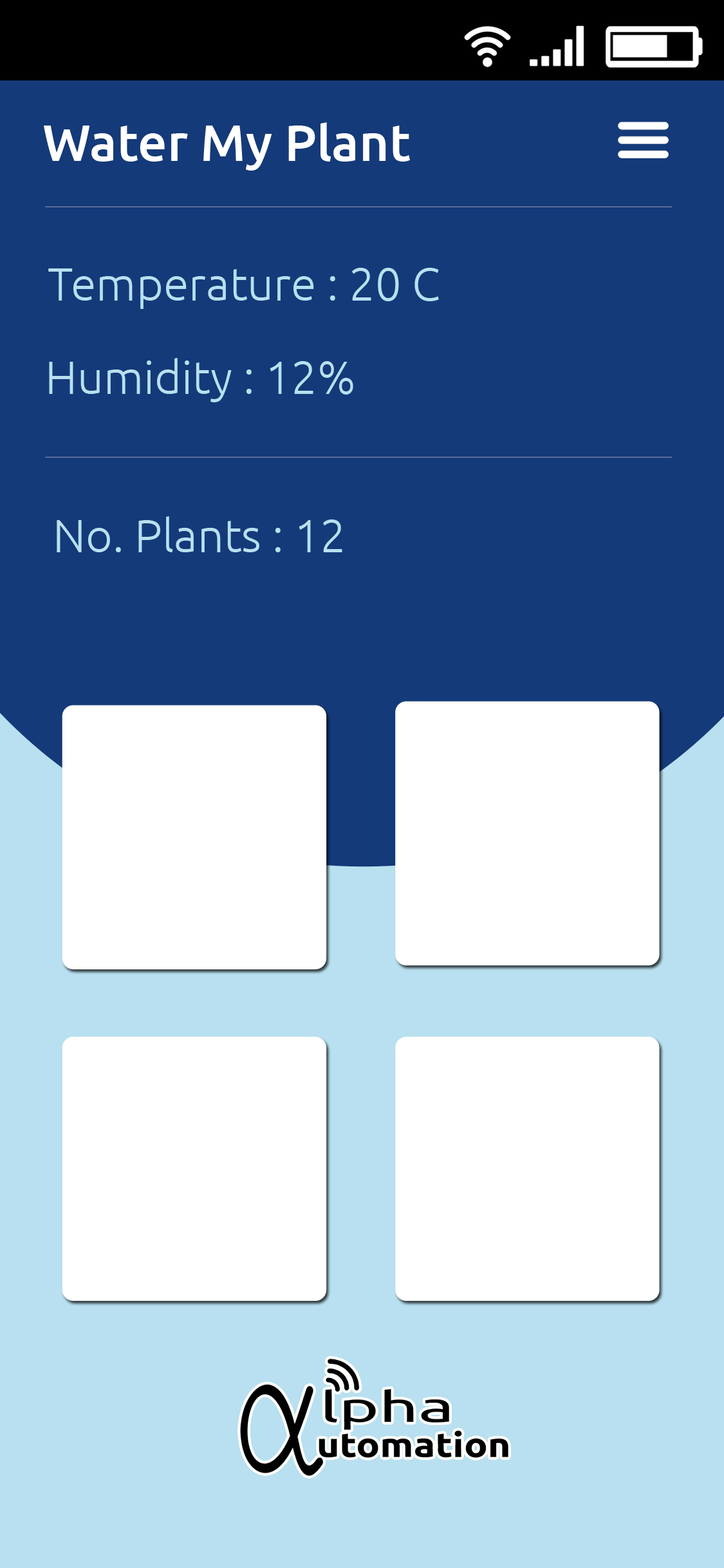
<style>
.page{position:relative;width:724px;height:1568px;background:#143a79}
.page>*{position:absolute;margin:0}
.t1{font:51.5px "Ubuntu-Medium";color:#ffffff}
.t2{font:46.3px "Ubuntu-Light";color:#b8e0f0}
</style>
<div class="page">
<p class="t1" style="left:44px;top:122px;width:366px;height:49px">Water My Plant</p>
<p class="t2" style="left:48px;top:268px;width:391px;height:41px">Temperature : 20 C</p>
<p class="t2" style="left:49px;top:358px;width:304px;height:44px">Humidity : 12%</p>
<p class="t2" style="left:57px;top:516px;width:285px;height:36px">No. Plants : 12</p>
</div>
